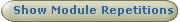
<style>
.page{position:relative;width:180px;height:22px}
.page>*{position:absolute;margin:0}
.t1{font:11px "Verdana-Bold";color:#336699}
</style>
<div class="page">
<p class="t1" style="left:14px;top:5px;width:159px;height:11px">Show Module Repetitions</p>
</div>
